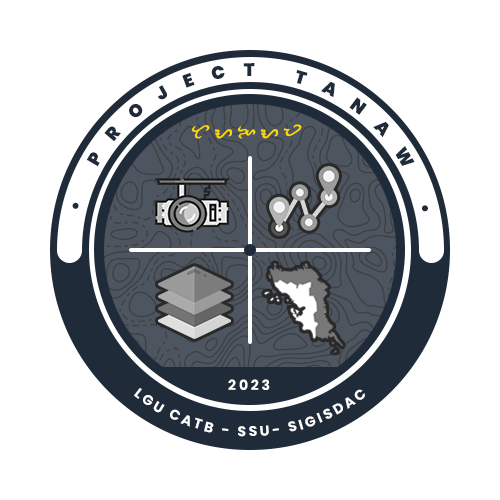
<style>
.page{position:relative;width:500px;height:500px;background:#ffffff}
.page>*{position:absolute;margin:0}
.t1{font:24px "BaybayinModernScript";letter-spacing:0.2em;color:#ffd800;font-weight:bold}
.t2{font:14px "Poppins-Bold";letter-spacing:0.2em;color:#ffffff}
</style>
<div class="page">
<p class="t1" style="left:191px;top:124px;width:111px;height:15px">TANAW</p>
<p class="t2" style="left:134px;top:388px;width:231px;height:49px;text-align:center">LGU CATB - SSU- SIGISDAC</p>
<p class="t2" style="left:228px;top:379px;width:42px;height:11px">2023</p>
</div>
